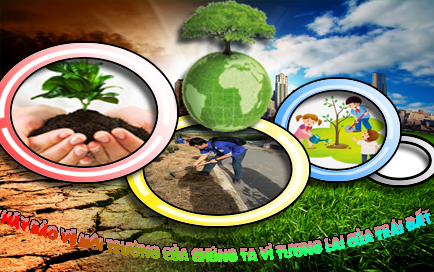
<style>
.page{position:relative;width:434px;height:272px}
.page>*{position:absolute;margin:0}
.t1{font:12.6px "SVN-ALoveOfThunder"}
.t2{font:12.6px "MyriadPro-Regular"}
</style>
<div class="page">
<p class="t1" style="left:0px;top:208px;width:430px;height:50px;text-align:center">HÃY BẢO VỆ MÔI TRƯỜNG CỦA CHÚNG TA VÌ TƯƠNG LAI CỦA TRÁI ĐẤ<span class="t2">T</span></p>
</div>
